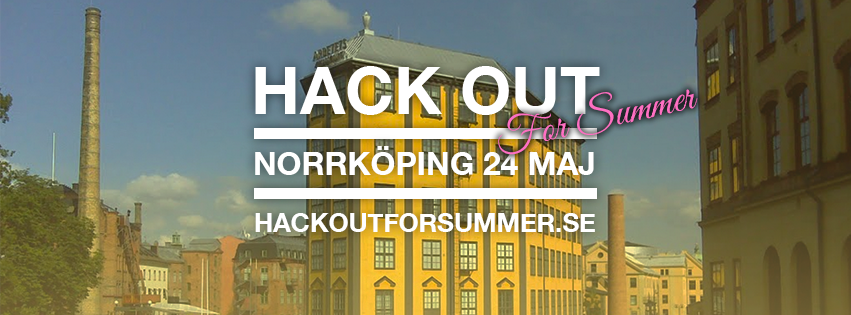
<style>
.page{position:relative;width:851px;height:315px}
.page>*{position:absolute;margin:0}
.t1{font:43.3px "GreatVibes-Regular";color:#ff70c3}
.t2{font:31.9px "HelveticaNeue-Bold";color:#ffffff}
.t3{font:25.8px "HelveticaNeue-Bold";color:#ffffff}
</style>
<div class="page">
<p class="t1" style="left:498px;top:89px;width:200px;height:66px;rotate:-13deg">For Summer</p>
<p class="t2" style="left:255px;top:146px;width:339px;height:29px">NORRKÖPING 24 MAJ</p>
<p class="t3" style="left:255px;top:213px;width:340px;height:19px">HACKOUTFORSUMMER.SE</p>
</div>
